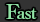
<style>
.page{position:relative;width:40px;height:22px;background:#333333}
.page>*{position:absolute;margin:0}
.t1{font:16px "RyuminPro-ExBold";letter-spacing:-0.08em;color:#90e2a5}
.t2{font:20px "RyuminPro-ExBold";letter-spacing:-0.08em;color:#90e2a5}
</style>
<div class="page">
<p class="t1" style="left:6px;top:4px;width:31px;height:16px"><span class="t2">F</span>ast</p>
</div>
